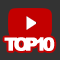
<style>
.page{position:relative;width:60px;height:60px;background:#333333}
.page>*{position:absolute;margin:0}
.t1{font:18px "Arial-Black";letter-spacing:-0.2em;color:#ffffff;text-transform:uppercase;font-weight:bold}
</style>
<div class="page">
<p class="t1" style="left:4px;top:37px;width:51px;height:14px">top10</p>
</div>
